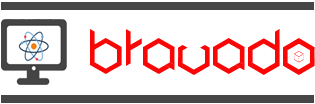
<style>
.page{position:relative;width:315px;height:104px;background:#ffffff}
.page>*{position:absolute;margin:0}
.t1{font:42.9px "Cubic";color:#f90606}
</style>
<div class="page">
<p class="t1" style="left:90px;top:29px;width:225px;height:46px">Bravado</p>
</div>
